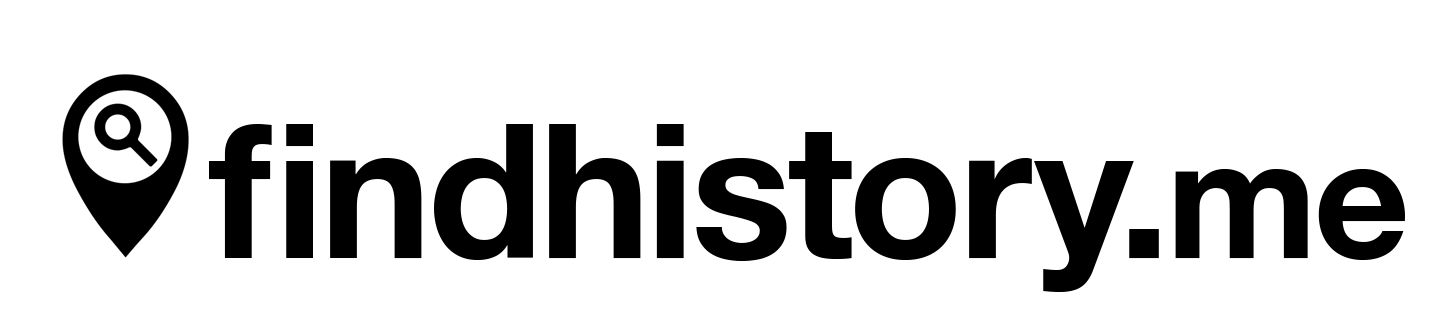
<style>
.page{position:relative;width:1440px;height:320px;background:#ffffff}
.page>*{position:absolute;margin:0}
.t1{font:187.5px "HelveticaNeue-Bold";letter-spacing:-0.01em;color:#000000}
.t2{font:166.7px "HelveticaNeue-Bold";letter-spacing:-0.01em;color:#000000}
</style>
<div class="page">
<p class="t1" style="left:209px;top:124px;width:1196px;height:168px">findhistory.<span class="t2">me</span></p>
</div>
